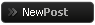
<style>
.page{position:relative;width:95px;height:25px}
.page>*{position:absolute;margin:0}
.t1{font:11px "Tahoma";color:#ababab;font-weight:bold}
.t2{font:11px "Tahoma";color:#ffffff}
</style>
<div class="page">
<p class="t1" style="left:23px;top:8px;width:45px;height:8px"><span class="t2">New</span>Post</p>
</div>
